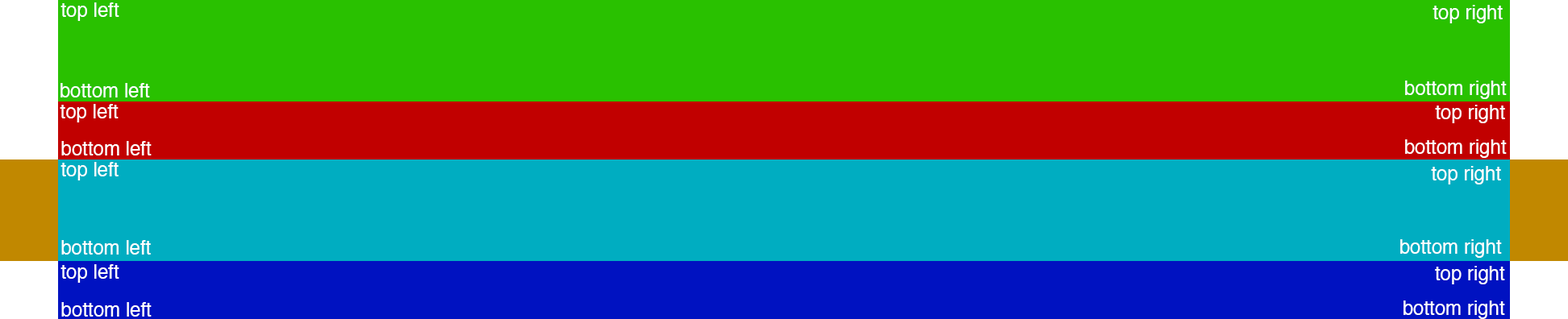
<style>
.page{position:relative;width:1568px;height:319px;background:#29c100}
.page>*{position:absolute;margin:0}
.t1{font:19.4px "Helvetica";color:#ffffff}
</style>
<div class="page">
<p class="t1" style="left:60px;top:2px;width:59px;height:19px">top left</p>
<p class="t1" style="left:1432px;top:5px;width:71px;height:18px">top right</p>
<p class="t1" style="left:60px;top:83px;width:90px;height:15px">bottom left</p>
<p class="t1" style="left:1405px;top:81px;width:102px;height:18px">bottom right</p>
<p class="t1" style="left:60px;top:104px;width:59px;height:19px">top left</p>
<p class="t1" style="left:1435px;top:105px;width:70px;height:18px">top right</p>
<p class="t1" style="left:61px;top:141px;width:91px;height:15px">bottom left</p>
<p class="t1" style="left:1405px;top:140px;width:102px;height:18px">bottom right</p>
<p class="t1" style="left:60px;top:162px;width:59px;height:19px">top left</p>
<p class="t1" style="left:1431px;top:166px;width:70px;height:19px">top right</p>
<p class="t1" style="left:61px;top:240px;width:90px;height:15px">bottom left</p>
<p class="t1" style="left:1400px;top:240px;width:102px;height:18px">bottom right</p>
<p class="t1" style="left:60px;top:265px;width:59px;height:18px">top left</p>
<p class="t1" style="left:1435px;top:266px;width:70px;height:19px">top right</p>
<p class="t1" style="left:61px;top:302px;width:91px;height:15px">bottom left</p>
<p class="t1" style="left:1403px;top:301px;width:102px;height:18px">bottom right</p>
</div>
